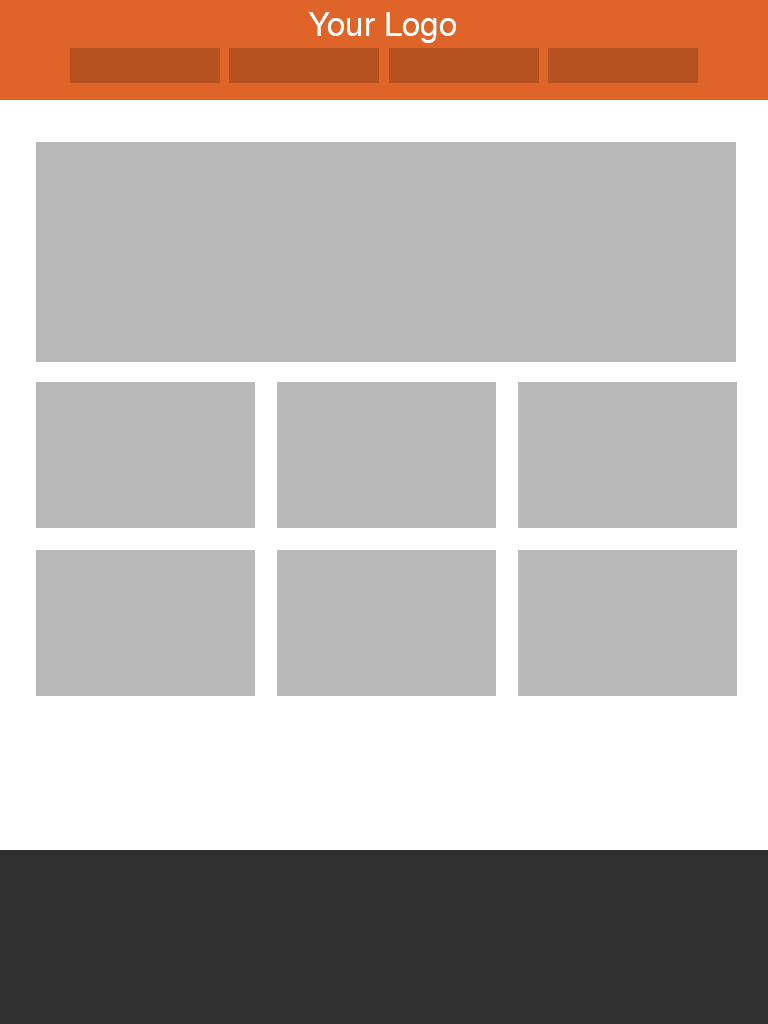
<style>
.page{position:relative;width:768px;height:1024px;background:#b9b9b9}
.page>*{position:absolute;margin:0}
.t1{font:32.8px "Helvetica";color:#ffffff}
</style>
<div class="page">
<p class="t1" style="left:308px;top:12px;width:148px;height:31px">Your Logo</p>
</div>
